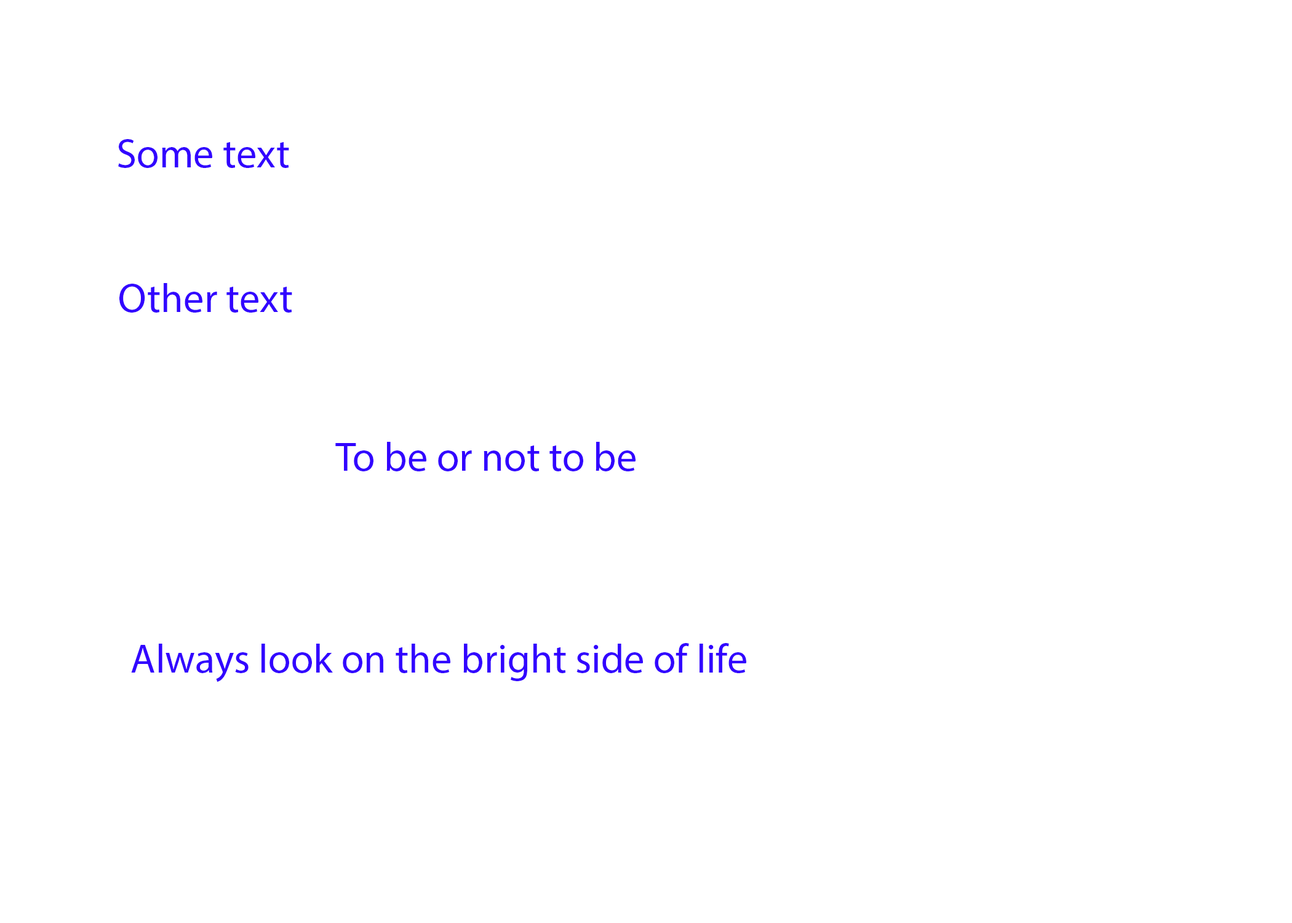
<style>
.page{position:relative;width:1292px;height:923px;background:#ffffff}
.page>*{position:absolute;margin:0}
.t1{font:41px "MyriadPro-Regular";color:#3203ff}
</style>
<div class="page">
<p class="t1" style="left:118px;top:139px;width:171px;height:29px">Some text</p>
<p class="t1" style="left:119px;top:283px;width:173px;height:30px">Other text</p>
<p class="t1" style="left:335px;top:442px;width:301px;height:29px">To be or not to be</p>
<p class="t1" style="left:131px;top:643px;width:615px;height:39px">Always look on the bright side of life</p>
</div>
